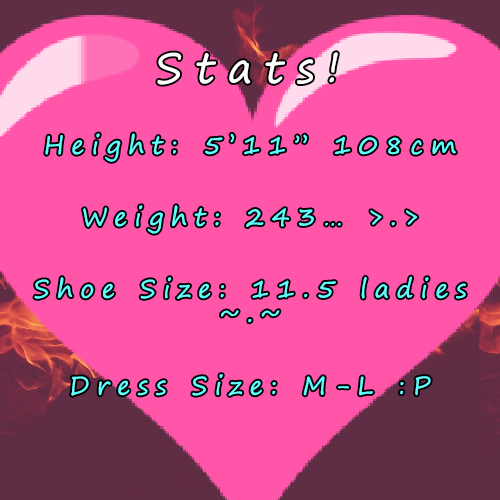
<style>
.page{position:relative;width:500px;height:500px;background:#ff56aa}
.page>*{position:absolute;margin:0}
.t1{font:41.7px "SegoePrint";letter-spacing:0.3em;color:#ffffff}
.t2{font:25px "SegoePrint";letter-spacing:0.3em;color:#5ffdff}
</style>
<div class="page">
<p class="t1" style="left:157px;top:52px;width:181px;height:33px">Stats!</p>
<p class="t2" style="left:34px;top:133px;width:432px;height:263px;text-align:center">Height: 5’11” 108cm<br><br>Weight: 243… &gt;.&gt;<br><br>Shoe Size: 11.5 ladies ~.~<br><br>Dress Size: M-L :P</p>
</div>
